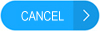
<style>
.page{position:relative;width:100px;height:31px;background:#15a9ff}
.page>*{position:absolute;margin:0}
.t1{font:13px "ArialNarrowSpecialG1";color:#ffffff}
</style>
<div class="page">
<p class="t1" style="left:21px;top:11px;width:43px;height:10px">CANCEL</p>
</div>
